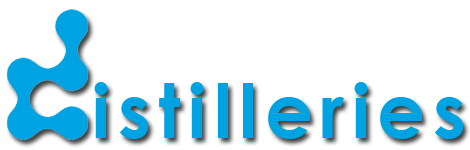
<style>
.page{position:relative;width:470px;height:150px;background:#ffffff}
.page>*{position:absolute;margin:0}
.t1{font:75px "CenturyGothic-Bold";letter-spacing:0.1em;color:#00a3e2}
</style>
<div class="page">
<p class="t1" style="left:94px;top:82px;width:370px;height:57px">istilleries</p>
</div>
